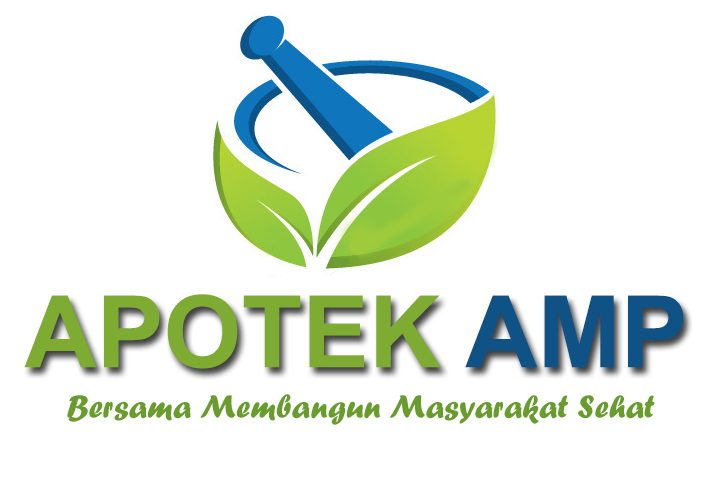
<style>
.page{position:relative;width:720px;height:500px;background:#ffffff}
.page>*{position:absolute;margin:0}
.t1{font:100px "Arial-BoldMT";color:#7eab32}
.t2{font:100px "Arial-BoldMT";color:#0f5286}
.t3{font:33.3px "ForteMT";color:#689d2b}
</style>
<div class="page">
<p class="t1" style="left:24px;top:294px;width:660px;height:75px">APOTEK <span class="t2">AMP</span></p>
<p class="t3" style="left:67px;top:394px;width:588px;height:31px">Bersama Membangun Masyarakat Sehat</p>
</div>
